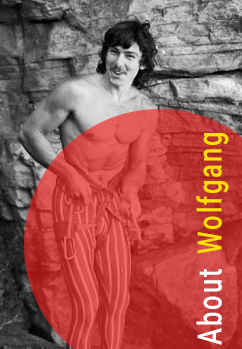
<style>
.page{position:relative;width:242px;height:349px}
.page>*{position:absolute;margin:0}
.t1{font:33.2px "Roboto-Medium";letter-spacing:0.075em;color:#ffde00;scale:0.77 1}
.t2{font:33.2px "Roboto-Medium";letter-spacing:0.075em;color:#fefefd;scale:0.77 1}
</style>
<div class="page">
<p class="t1" style="left:196px;top:133px;width:33px;height:212px;rotate:-90deg"><span class="t2">About </span>Wolfgang</p>
</div>
